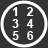
<style>
.page{position:relative;width:48px;height:48px;background:#333333}
.page>*{position:absolute;margin:0}
.t1{font:12px "Arial-BoldMT";color:#fefefe}
</style>
<div class="page">
<p class="t1" style="left:12px;top:7px;width:22px;height:33px;text-align:center">246<br>135</p>
</div>
